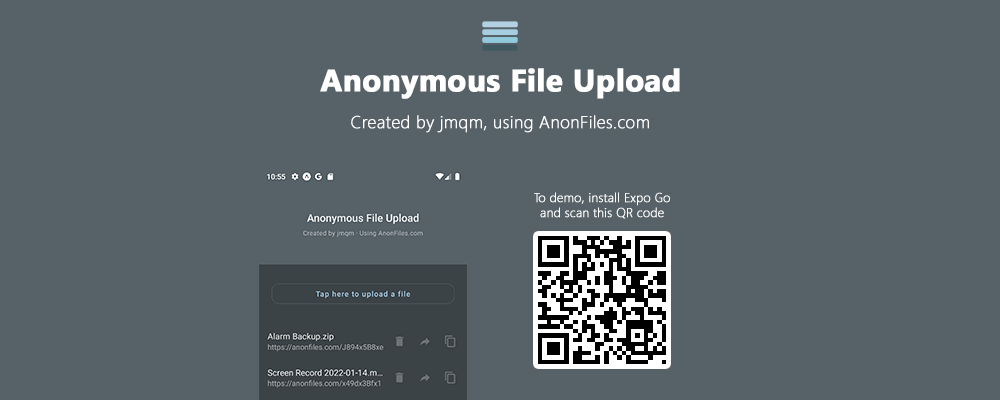
<style>
.page{position:relative;width:1000px;height:400px;background:#566168}
.page>*{position:absolute;margin:0}
.t1{font:30.7px "SegoeUI-Bold";color:#ffffff;font-weight:bold}
.t2{font:17.3px "SegoeUI-Light";color:#ffffff;font-weight:bold}
.t3{font:12.5px "SegoeUI-Light";color:#ffffff;font-weight:bold}
</style>
<div class="page">
<p class="t1" style="left:320px;top:68px;width:360px;height:31px">Anonymous File Upload</p>
<p class="t2" style="left:351px;top:115px;width:298px;height:18px">Created by jmqm, using AnonFiles.com</p>
<p class="t3" style="left:534px;top:192px;width:136px;height:27px;text-align:center">To demo, install Expo Go<br>and scan this QR code</p>
</div>
